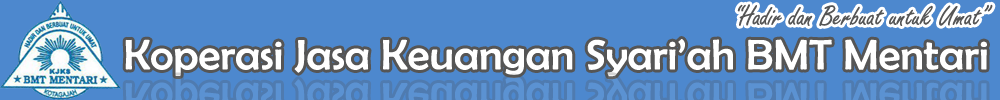
<style>
.page{position:relative;width:1000px;height:100px;background:#4d88ce}
.page>*{position:absolute;margin:0}
.t1{font:30px "FreestyleScript-Regular";color:#555555}
.t2{font:42.9px "BerlinSansFB-Reg";color:#ffffff;scale:1.05 1}
</style>
<div class="page">
<p class="t1" style="left:737px;top:4px;width:256px;height:23px">“Hadir dan Berbuat untuk Umat”</p>
<p class="t2" style="left:125px;top:39px;width:862px;height:38px">Koperasi Jasa Keuangan Syari’ah BMT Mentari</p>
</div>
